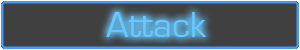
<style>
.page{position:relative;width:300px;height:50px;background:#404040}
.page>*{position:absolute;margin:0}
.t1{font:37.4px "EurostileRegular";color:#67c8ff}
</style>
<div class="page">
<p class="t1" style="left:106px;top:12px;width:101px;height:25px">Attack</p>
</div>
